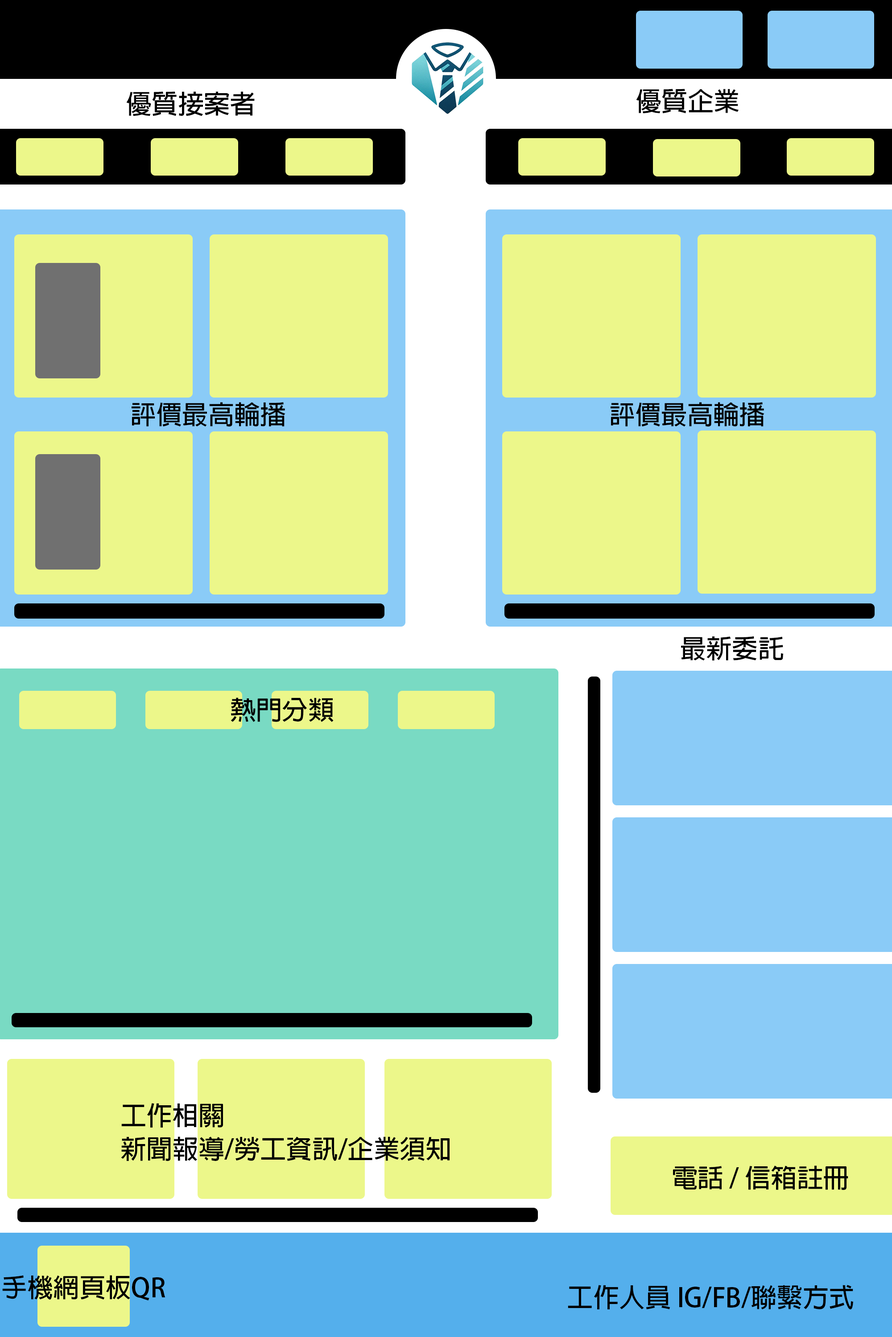
<style>
.page{position:relative;width:892px;height:1337px;background:#ecf78a}
.page>*{position:absolute;margin:0}
.t1{font:26px "AdobeFanHeitiStd-Bold";color:#000000}
.t2{font:26px/33.4px "AdobeFanHeitiStd-Bold";color:#000000}
</style>
<div class="page">
<p class="t1" style="left:636px;top:89px;width:103px;height:25px">優質企業</p>
<p class="t1" style="left:126px;top:91px;width:129px;height:25px">優質接案者</p>
<p class="t1" style="left:132px;top:402px;width:153px;height:25px">評價最高輪播</p>
<p class="t1" style="left:610px;top:402px;width:154px;height:25px">評價最高輪播</p>
<p class="t1" style="left:681px;top:636px;width:102px;height:25px">最新委託</p>
<p class="t1" style="left:230px;top:698px;width:103px;height:24px">熱門分類</p>
<p class="t2" style="left:121px;top:1103px;width:328px;height:58px">工作相關<br>新聞報導/勞工資訊/企業須知</p>
<p class="t1" style="left:673px;top:1166px;width:175px;height:24px">電話 / 信箱註冊</p>
<p class="t1" style="left:2px;top:1275px;width:163px;height:26px">手機網頁板QR</p>
<p class="t1" style="left:568px;top:1285px;width:285px;height:25px">工作人員 IG/FB/聯繫方式</p>
</div>
